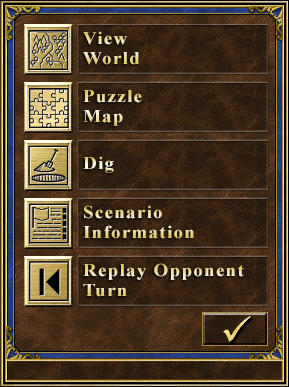
<style>
.page{position:relative;width:289px;height:387px}
.page>*{position:absolute;margin:0}
.t1{font:18px/20px "TimesNewRomanPS-BoldMT";letter-spacing:0.07em;scale:1.05 1}
.t2{font:18px "TimesNewRomanPS-BoldMT";letter-spacing:0.07em;scale:1.05 1}
</style>
<div class="page">
<p class="t1" style="left:83px;top:31px;width:56px;height:34px">View<br>World</p>
<p class="t1" style="left:83px;top:90px;width:59px;height:36px">Puzzle<br>Map</p>
<p class="t2" style="left:83px;top:156px;width:31px;height:17px">Dig</p>
<p class="t1" style="left:83px;top:205px;width:111px;height:34px">Scenario<br>Information</p>
<p class="t1" style="left:83px;top:263px;width:161px;height:34px">Replay Opponent<br>Turn</p>
</div>
